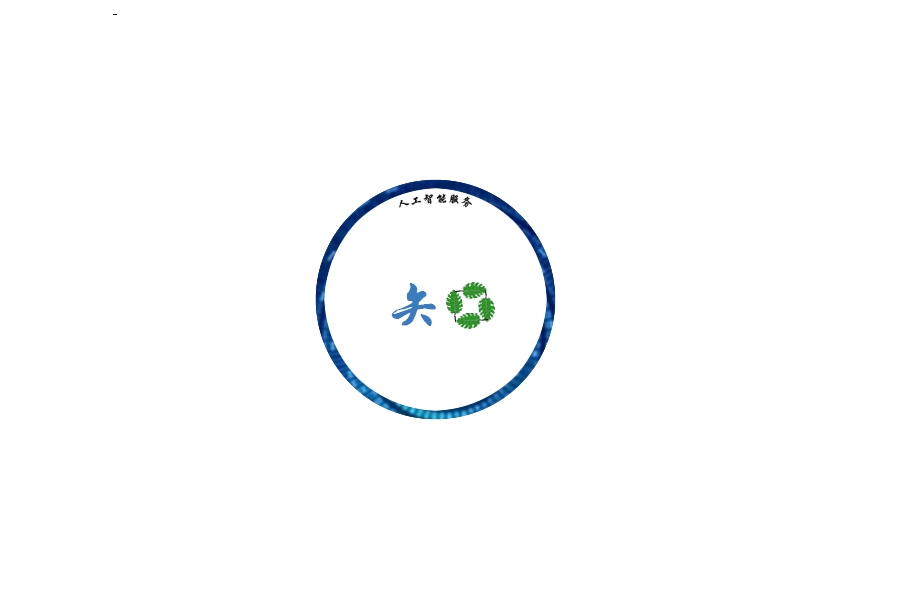
<style>
.page{position:relative;width:900px;height:600px;background:#ffffff}
.page>*{position:absolute;margin:0}
.t1{font:12.5px "STXingkai";color:#000000}
.t2{font:57.6px "STXingkai";color:#3a7cbd}
</style>
<div class="page">
<p class="t1" style="left:398px;top:193px;width:75px;height:15px">人工智能服务</p>
<p class="t2" style="left:391px;top:283px;width:45px;height:43px">矢</p>
</div>
